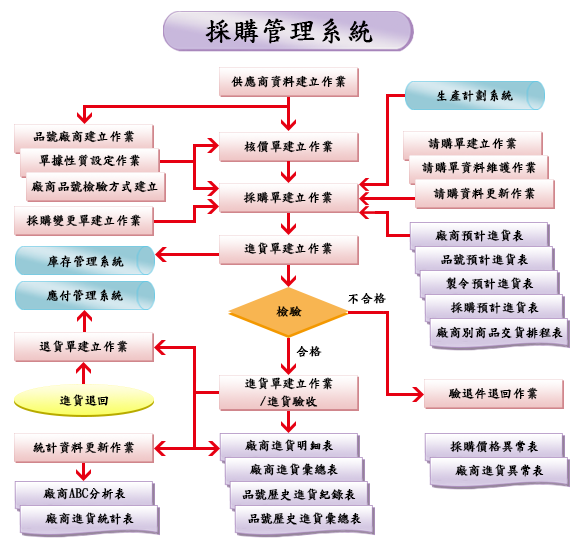
<style>
.page{position:relative;width:577px;height:545px;background:#ffffff}
.page>*{position:absolute;margin:0}
.t1{font:27.5px "DFKaiShu-SB-Estd-BF";color:#000000;font-weight:bold}
.t2{font:12.5px "DFKaiShu-SB-Estd-BF";color:#000000;font-weight:bold}
.t3{font:12.5px/17.5px "DFKaiShu-SB-Estd-BF";color:#000000;font-weight:bold}
</style>
<div class="page">
<p class="t1" style="left:205px;top:18px;width:168px;height:26px">採購管理系統</p>
<p class="t2" style="left:231px;top:75px;width:115px;height:13px">供應商資料建立作業</p>
<p class="t2" style="left:436px;top:89px;width:77px;height:13px">生產計劃系統</p>
<p class="t2" style="left:33px;top:130px;width:102px;height:13px">品號廠商建立作業</p>
<p class="t2" style="left:428px;top:137px;width:89px;height:13px">請購單建立作業</p>
<p class="t2" style="left:244px;top:140px;width:89px;height:13px">核價單建立作業</p>
<p class="t2" style="left:39px;top:154px;width:101px;height:13px">單據性質設定作業</p>
<p class="t2" style="left:421px;top:161px;width:115px;height:13px">請購單資料維護作業</p>
<p class="t2" style="left:31px;top:180px;width:127px;height:13px">廠商品號檢驗方式建立</p>
<p class="t2" style="left:243px;top:191px;width:90px;height:13px">採購單建立作業</p>
<p class="t2" style="left:433px;top:187px;width:102px;height:13px">請購資料更新作業</p>
<p class="t2" style="left:26px;top:214px;width:115px;height:13px">採購變更單建立作業</p>
<p class="t2" style="left:435px;top:229px;width:89px;height:13px">廠商預計進貨表</p>
<p class="t2" style="left:244px;top:242px;width:89px;height:13px">進貨單建立作業</p>
<p class="t2" style="left:47px;top:255px;width:77px;height:13px">庫存管理系統</p>
<p class="t2" style="left:441px;top:253px;width:87px;height:13px">品號預計進貨表</p>
<p class="t2" style="left:446px;top:277px;width:88px;height:13px">製令預計進貨表</p>
<p class="t2" style="left:46px;top:289px;width:77px;height:13px">應付管理系統</p>
<p class="t2" style="left:348px;top:292px;width:38px;height:12px">不合格</p>
<p class="t2" style="left:450px;top:301px;width:89px;height:13px">採購預計進貨表</p>
<p class="t2" style="left:276px;top:306px;width:26px;height:11px">檢驗</p>
<p class="t2" style="left:436px;top:326px;width:127px;height:13px">廠商別商品交貨排程表</p>
<p class="t2" style="left:39px;top:340px;width:89px;height:13px">退貨單建立作業</p>
<p class="t2" style="left:296px;top:345px;width:26px;height:12px">合格</p>
<p class="t3" style="left:244px;top:377px;width:89px;height:31px;text-align:center">進貨單建立作業<br>/進貨驗收</p>
<p class="t2" style="left:448px;top:387px;width:90px;height:13px">驗退件退回作業</p>
<p class="t2" style="left:59px;top:394px;width:50px;height:13px">進貨退回</p>
<p class="t2" style="left:33px;top:441px;width:102px;height:13px">統計資料更新作業</p>
<p class="t2" style="left:245px;top:439px;width:88px;height:13px">廠商進貨明細表</p>
<p class="t2" style="left:450px;top:440px;width:88px;height:13px">採購價格異常表</p>
<p class="t2" style="left:249px;top:463px;width:89px;height:13px">廠商進貨彙總表</p>
<p class="t2" style="left:455px;top:464px;width:89px;height:13px">廠商進貨異常表</p>
<p class="t2" style="left:43px;top:487px;width:83px;height:13px">廠商ABC分析表</p>
<p class="t2" style="left:242px;top:488px;width:114px;height:13px">品號歷史進貨紀錄表</p>
<p class="t2" style="left:45px;top:512px;width:89px;height:13px">廠商進貨統計表</p>
<p class="t2" style="left:248px;top:512px;width:113px;height:13px">品號歷史進貨彙總表</p>
</div>
